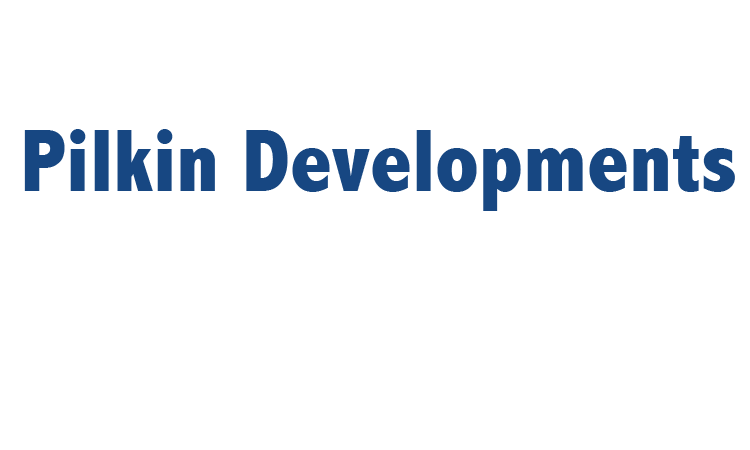
<style>
.page{position:relative;width:750px;height:450px;background:#ffffff}
.page>*{position:absolute;margin:0}
.t1{font:90px "AbadiMT-CondensedExtraBold";color:#174782}
</style>
<div class="page">
<p class="t1" style="left:24px;top:129px;width:711px;height:82px">Pilkin Developments</p>
</div>
